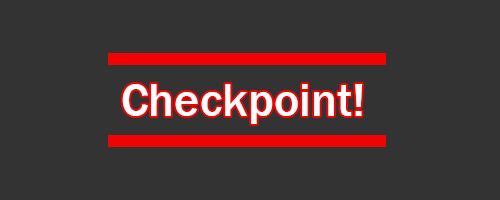
<style>
.page{position:relative;width:500px;height:200px;background:#333333}
.page>*{position:absolute;margin:0}
.t1{font:48px "FranklinGothic-Medium";color:#ffffff}
</style>
<div class="page">
<p class="t1" style="left:122px;top:84px;width:241px;height:40px">Checkpoint!</p>
</div>
